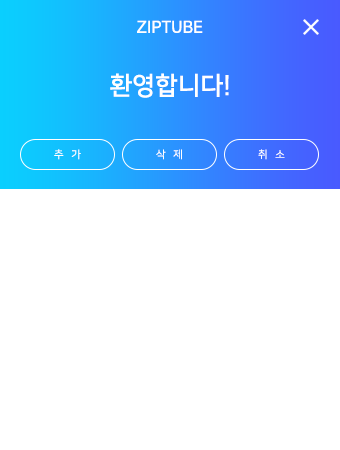
<style>
.page{position:relative;width:340px;height:450px;background:#ffffff}
.page>*{position:absolute;margin:0}
.t1{font:16.7px "NanumSquareB";color:#ffffff}
.t2{font:25px "NanumSquareB";color:#ffffff}
.t3{font:10.4px "NanumSquareR";color:#ffffff}
</style>
<div class="page">
<p class="t1" style="left:137px;top:20px;width:66px;height:13px">ZIPTUBE</p>
<p class="t2" style="left:110px;top:73px;width:119px;height:25px">환영합니다!</p>
<p class="t3" style="left:54px;top:149px;width:27px;height:11px">추   가</p>
<p class="t3" style="left:156px;top:149px;width:26px;height:11px">삭   제</p>
<p class="t3" style="left:258px;top:149px;width:27px;height:11px">취   소</p>
</div>
